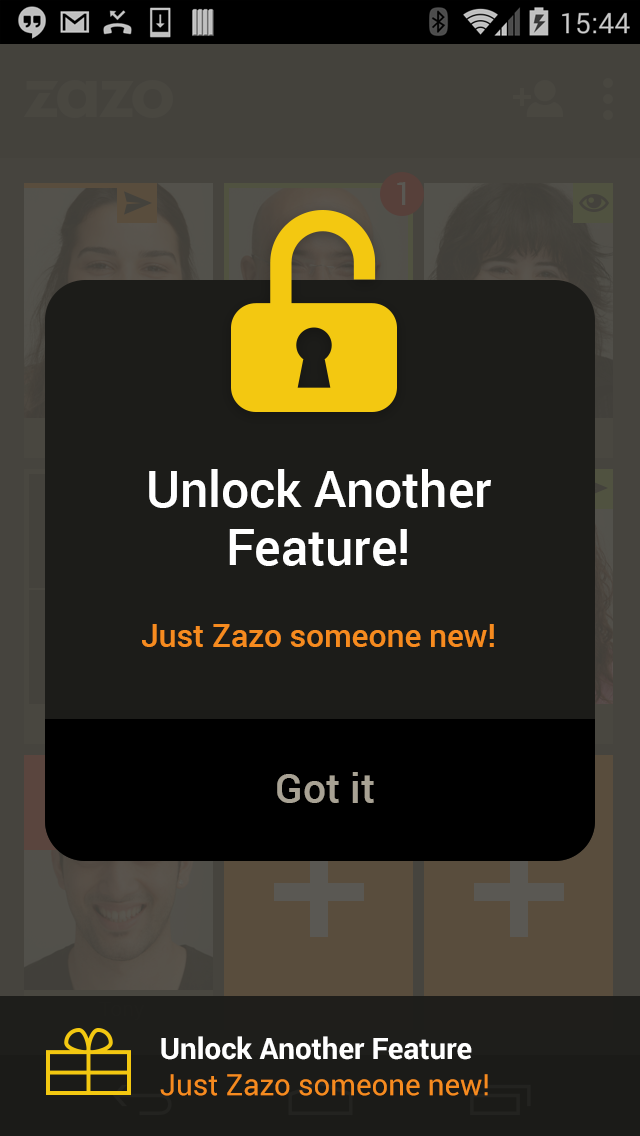
<style>
.page{position:relative;width:640px;height:1136px;background:#1c1c19}
.page>*{position:absolute;margin:0}
.t1{font:49.8px/58.9px "Roboto-Medium";color:#ffffff}
.t2{font:31.7px/40.8px "Roboto-Medium";color:#f68b1f}
.t3{font:40.8px "Roboto-Medium";color:#a8a294}
.t4{font:29.4px/36.2px "Roboto-Bold";color:#ffffff}
.t5{font:29.4px/36.2px "Roboto-Regular";color:#f68b1f}
</style>
<div class="page">
<p class="t1" style="left:142px;top:469px;width:352px;height:178px;text-align:center">Unlock Another Feature!<br><br><br><span class="t2">Just Zazo someone new!</span></p>
<p class="t3" style="left:277px;top:772px;width:97px;height:31px">Got it</p>
<p class="t4" style="left:160px;top:1036px;width:328px;height:60px">Unlock Another Feature<br><span class="t5">Just Zazo someone new!</span></p>
</div>
